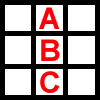
<style>
.page{position:relative;width:100px;height:100px;background:#ffffff}
.page>*{position:absolute;margin:0}
.t1{font:30px "Arial-BoldMT";color:#fb0006}
</style>
<div class="page">
<p class="t1" style="left:39px;top:7px;width:21px;height:22px">A</p>
<p class="t1" style="left:41px;top:39px;width:19px;height:22px">B</p>
<p class="t1" style="left:40px;top:71px;width:20px;height:22px">C</p>
</div>
